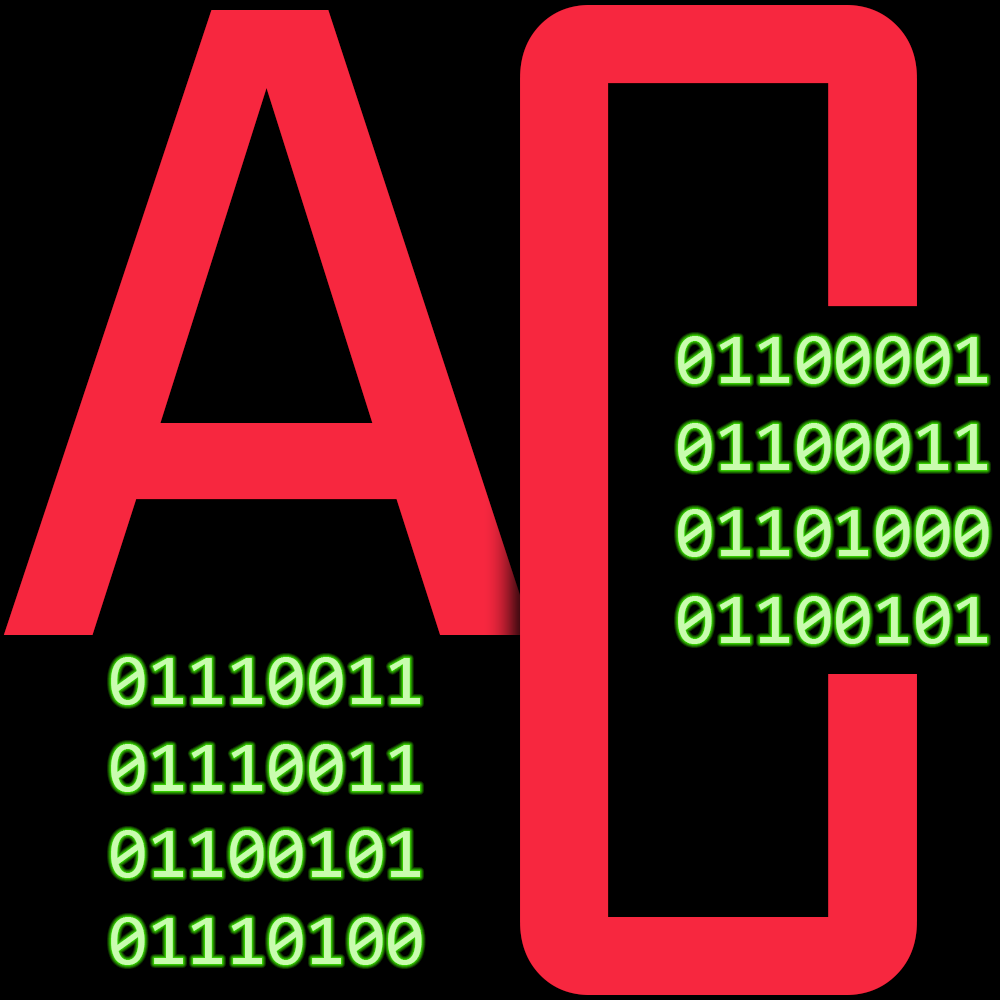
<style>
.page{position:relative;width:1000px;height:1000px;background:#000000}
.page>*{position:absolute;margin:0}
.t1{font:1296px "AgencyFB-Reg";color:#f7273f}
.t2{font:980px "Consolas";color:#f7273f}
.t3{font:72px "Consolas";color:#c9fcaf}
</style>
<div class="page">
<p class="t1" style="left:520px;top:5px;width:397px;height:990px">C</p>
<p class="t2" style="left:3px;top:10px;width:530px;height:625px">A</p>
<p class="t3" style="left:678px;top:336px;width:311px;height:308px">01100001 <br>01100011 <br>01101000 <br>01100101</p>
<p class="t3" style="left:111px;top:657px;width:311px;height:308px">01110011 <br>01110011 <br>01100101 <br>01110100</p>
</div>
